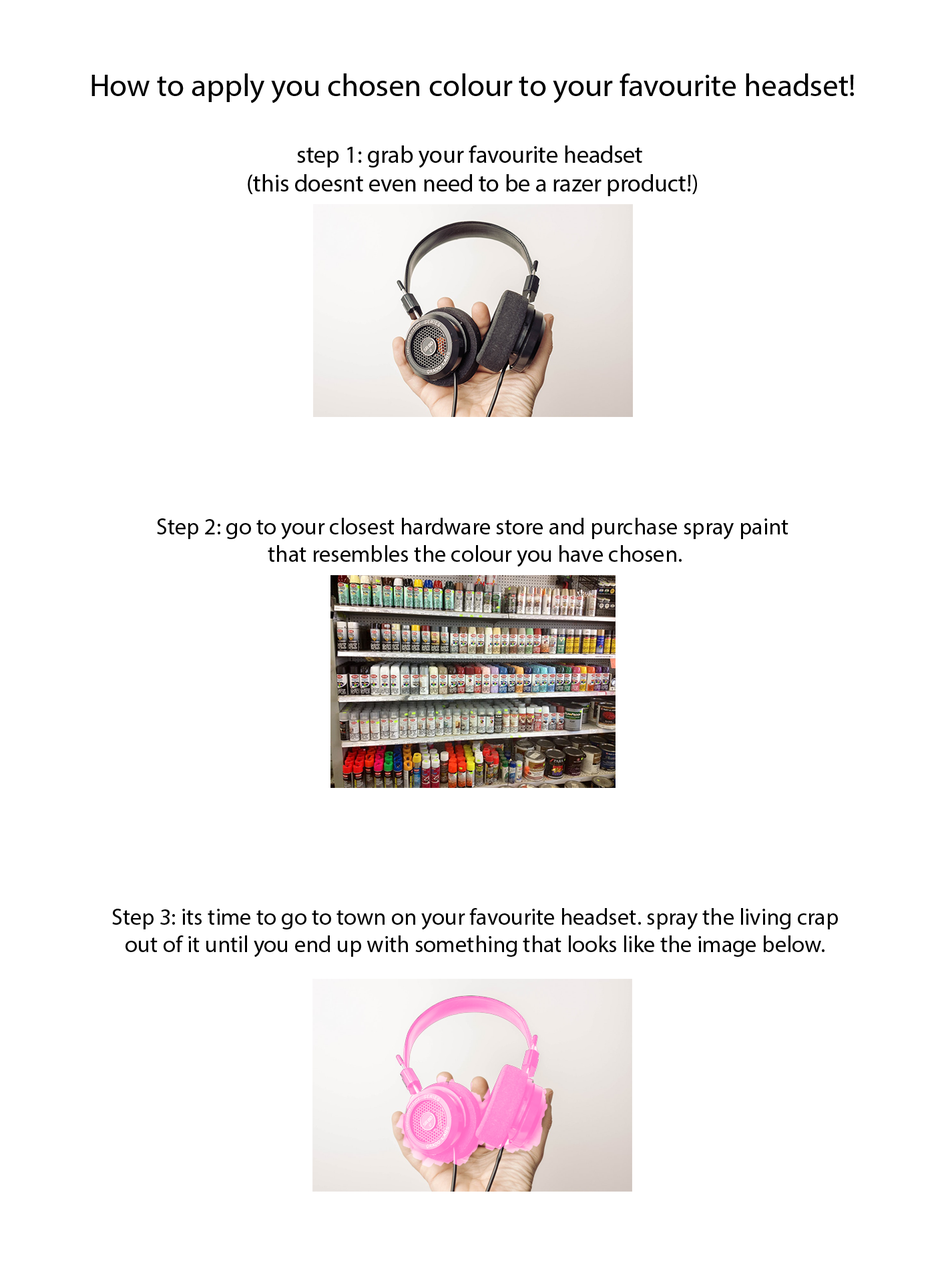
<style>
.page{position:relative;width:946px;height:1261px;background:#ffffff}
.page>*{position:absolute;margin:0}
.t1{font:31.5px "MyriadPro-Regular";color:#000000}
.t2{font:24px "MyriadPro-Regular";color:#000000}
.t3{font:23px "MyriadPro-Regular";color:#000000}
</style>
<div class="page">
<p class="t1" style="left:91px;top:73px;width:762px;height:30px">How to apply you chosen colour to your favourite headset!</p>
<p class="t2" style="left:248px;top:145px;width:449px;height:51px;text-align:center">step 1: grab your favourite headset <br>(this doesnt even need to be a razer product!)</p>
<p class="t3" style="left:157px;top:518px;width:631px;height:49px;text-align:center">Step 2: go to your closest hardware store and purchase spray paint <br>that resembles the colour you have chosen.</p>
<p class="t3" style="left:112px;top:908px;width:725px;height:50px;text-align:center">Step 3: its time to go to town on your favourite headset. spray the living crap<br>out of it until you end up with something that looks like the image below.</p>
</div>
